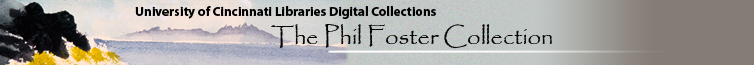
<style>
.page{position:relative;width:754px;height:65px}
.page>*{position:absolute;margin:0}
.t1{font:13.2px "MyriadPro-Bold";color:#000000}
.t2{font:24px "Papyrus-Regular";color:#010101}
</style>
<div class="page">
<p class="t1" style="left:135px;top:6px;width:301px;height:13px">University of Cincinnati Libraries Digital Collections</p>
<p class="t2" style="left:271px;top:24px;width:281px;height:25px">The Phil Foster Collection</p>
</div>
